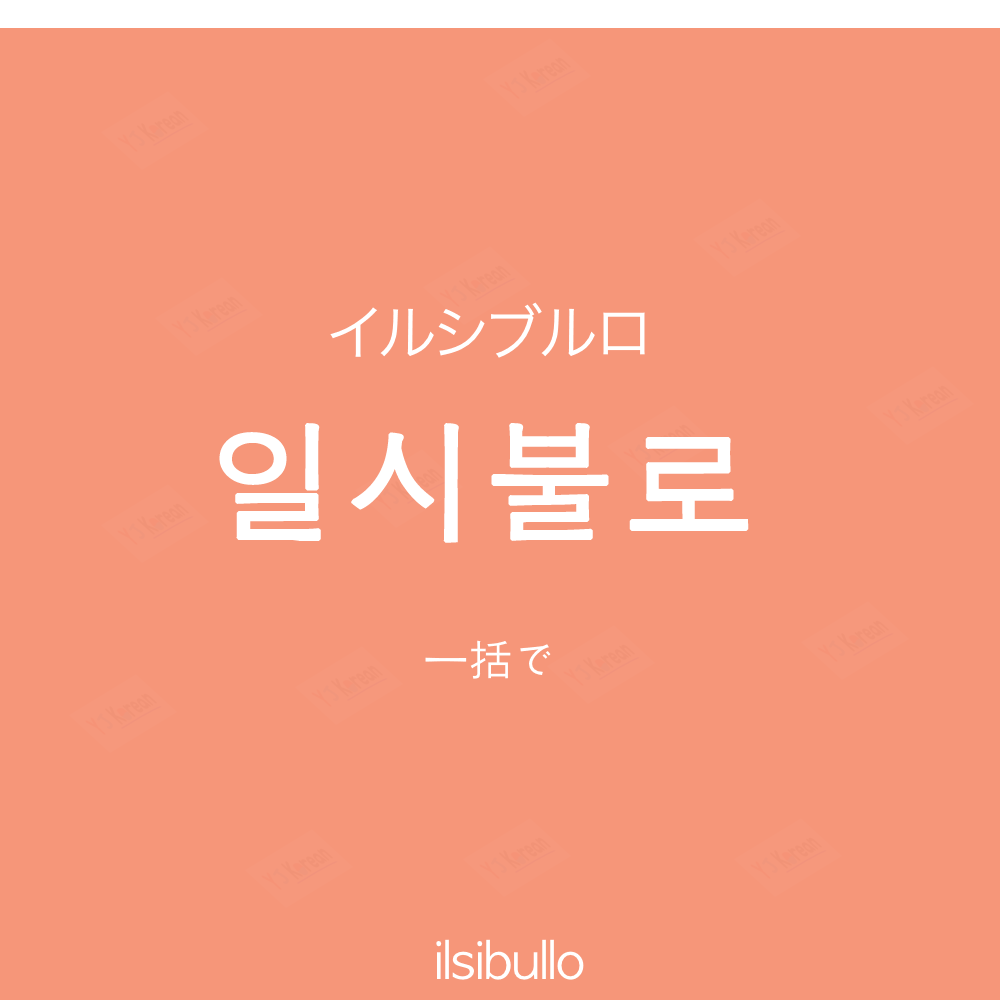
<style>
.page{position:relative;width:1000px;height:1000px;background:#f69679}
.page>*{position:absolute;margin:0}
.t1{font:60px "HiraKakuProN-W3";color:#ffffff}
.t2{font:130px "AppleGothic";letter-spacing:0.04em;color:#ffffff;font-weight:bold}
.t3{font:45px "AppleGothic";color:#ffffff}
.t4{font:50px "AppleGothic";color:#ffffff}
</style>
<div class="page">
<p class="t1" style="left:330px;top:302px;width:315px;height:56px">イルシブルロ</p>
<p class="t2" style="left:219px;top:423px;width:530px;height:120px">일시불로</p>
<p class="t3" style="left:425px;top:640px;width:126px;height:39px">一括で</p>
<p class="t4" style="left:436px;top:939px;width:148px;height:41px">ilsibullo</p>
</div>
